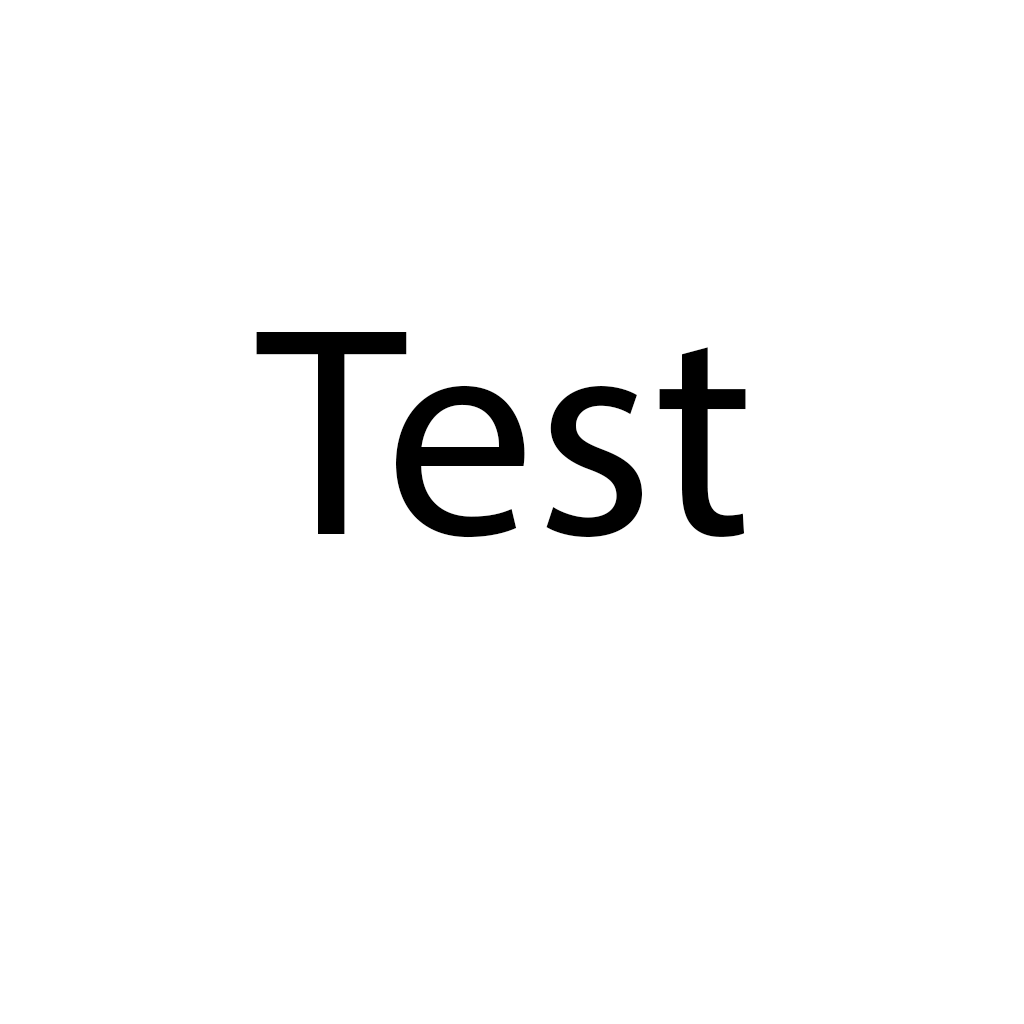
<style>
.page{position:relative;width:1024px;height:1024px;background:#ffffff}
.page>*{position:absolute;margin:0}
.t1{font:300px "MyriadPro-Regular";color:#000000}
</style>
<div class="page">
<p class="t1" style="left:256px;top:332px;width:490px;height:206px">Test</p>
</div>
